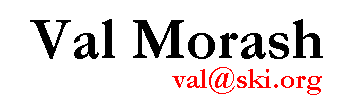
<style>
.page{position:relative;width:356px;height:109px;background:#ffffff}
.page>*{position:absolute;margin:0}
.t1{font:60px "Garamond-Bold";color:#000000}
.t2{font:30px "Garamond-Bold";color:#ff0000}
</style>
<div class="page">
<p class="t1" style="left:30px;top:19px;width:293px;height:40px">Val Morash</p>
<p class="t2" style="left:172px;top:67px;width:150px;height:28px">val@ski.org</p>
</div>
